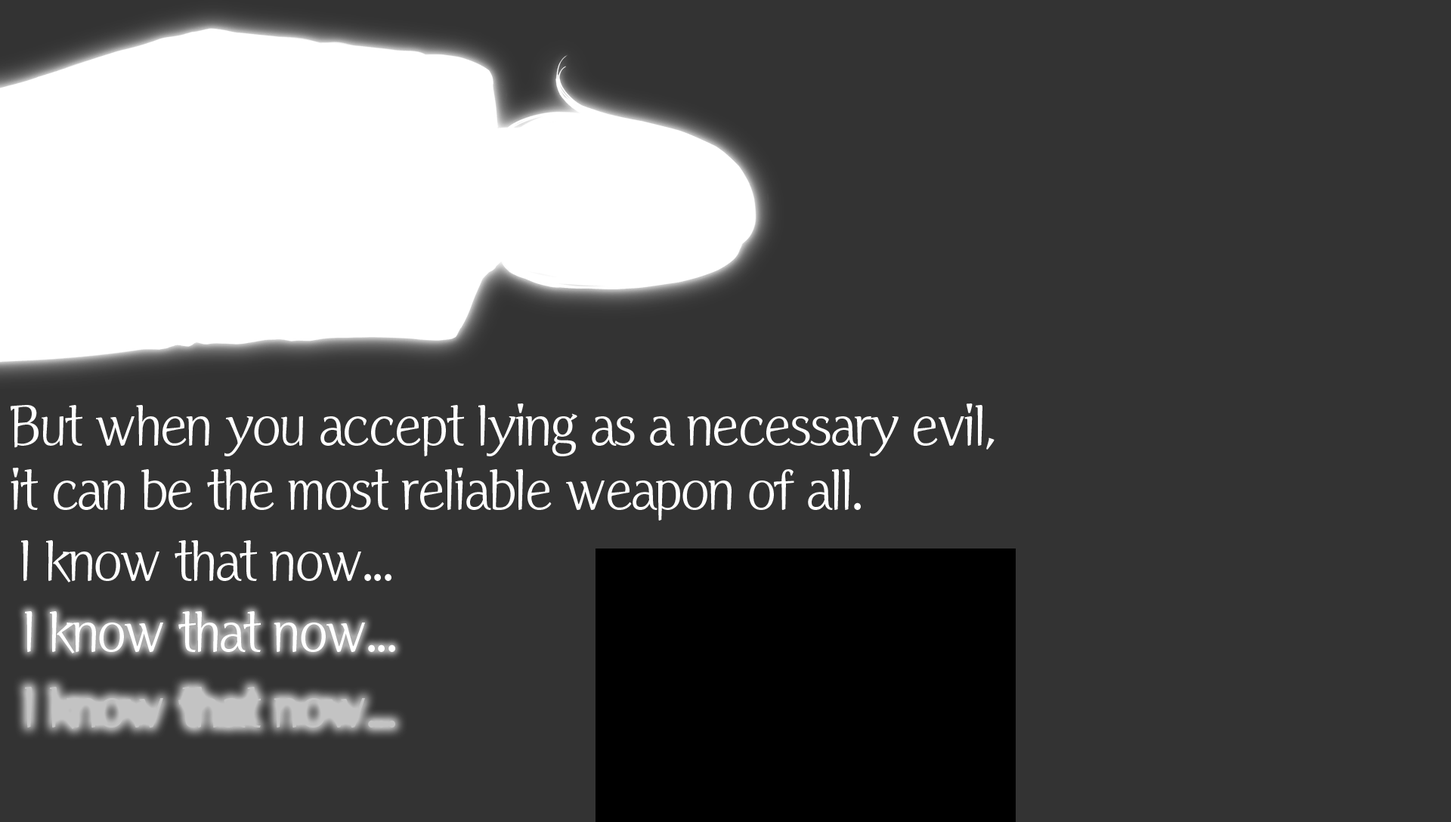
<style>
.page{position:relative;width:1451px;height:822px;background:#333333}
.page>*{position:absolute;margin:0}
.t1{font:55.2px/57.4px "MoariaStd-Regular";letter-spacing:-0.06em;color:#ffffff;scale:0.95 1}
.t2{font:55.2px "MoariaStd-Regular";letter-spacing:-0.06em;color:#ffffff;scale:0.95 1}
.t3{font:55.2px "MoariaStd-Regular";letter-spacing:-0.06em;color:#c3c3c3;scale:0.95 1}
</style>
<div class="page">
<p class="t1" style="left:11px;top:403px;width:983px;height:118px">But when you accept lying as a necessary evil, <br>it can be the most reliable weapon of all.</p>
<p class="t2" style="left:21px;top:540px;width:370px;height:43px">I know that now...</p>
<p class="t2" style="left:25px;top:611px;width:370px;height:43px">I know that now...</p>
<p class="t3" style="left:25px;top:687px;width:370px;height:42px">I know that now...</p>
</div>
